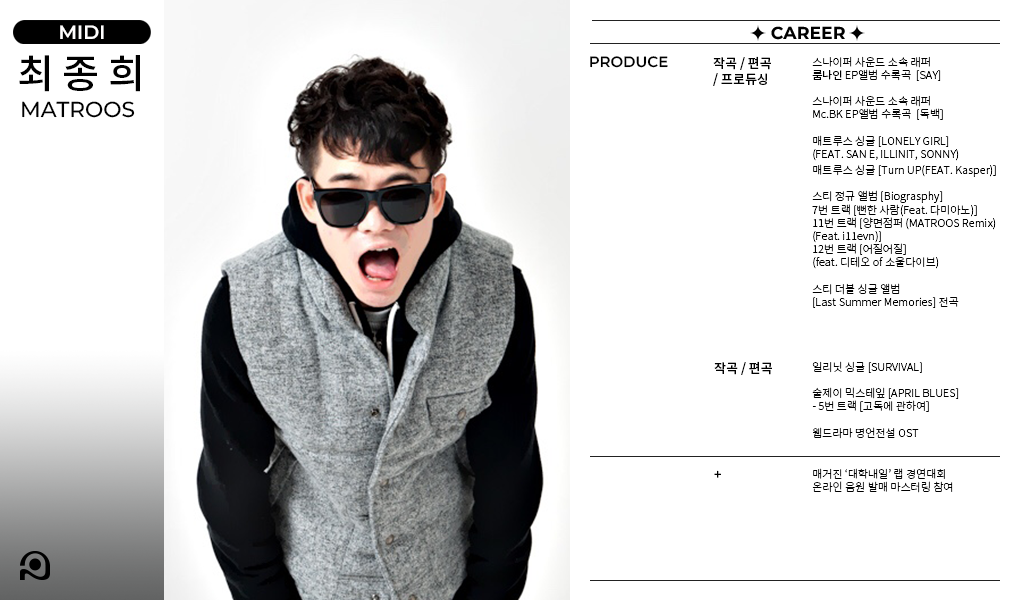
<style>
.page{position:relative;width:1020px;height:600px;background:#ffffff}
.page>*{position:absolute;margin:0}
.t1{font:19.4px "Montserrat-SemiBold";color:#fffefe}
.t2{font:17.3px "Montserrat-Bold";color:#000000}
.t3{font:39.9px "NotoSansKR-Medium";color:#000000}
.t4{font:15px "Montserrat-SemiBold";color:#000000}
.t5{font:13px "NotoSansKR-Medium";color:#000000}
.t6{font:11px "NotoSansKR-Light";color:#000000}
.t7{font:11px "NotoSansKR-Regular";color:#000000}
.t8{font:11px/16px "NotoSansKR-Light";color:#000000}
.t9{font:21.7px "Montserrat-Medium";color:#000000}
</style>
<div class="page">
<p class="t1" style="left:60px;top:25px;width:44px;height:14px">MIDI</p>
<p class="t2" style="left:771px;top:26px;width:74px;height:14px">CAREER</p>
<p class="t3" style="left:19px;top:55px;width:121px;height:37px">최 종 희</p>
<p class="t4" style="left:590px;top:56px;width:78px;height:12px">PRODUCE</p>
<p class="t5" style="left:713px;top:56px;width:58px;height:30px">작곡 / 편곡<br>/ 프로듀싱</p>
<p class="t6" style="left:812px;top:56px;width:184px;height:252px">스나이퍼 사운드 소속 래퍼 <br><span class="t7">룸나인</span> EP앨범 수록곡  [SAY]<br><br>스나이퍼 사운드 소속 래퍼 <br>Mc.BK EP앨범 수록곡  [독백] <br><br>매트루스 싱글 [LONELY GIRL]<br>(FEAT. SAN E, ILLINIT, SONNY)<br><span class="t8">매트루스 싱글 [Turn UP(FEAT. Kasper)]<br></span><br>스티 정규 앨범 [Biograsphy] <br>7번 트랙 [뻔한 사람(Feat. 다미아노)] <br>11번 트랙 [양면점퍼 (MATROOS Remix) <br>(Feat. i11evn)]<br>12번 트랙 [어질어질]<br>(feat. 디테오 of 소울다이브)<br><br>스티 더블 싱글 앨범 <br>[Last Summer Memories] 전곡 <br><br>골드마이너스 싱글 앨범 [Paradise]</p>
<p class="t9" style="left:22px;top:101px;width:113px;height:17px">MATROOS</p>
<p class="t5" style="left:714px;top:361px;width:58px;height:14px">작곡 / 편곡</p>
<p class="t6" style="left:812px;top:361px;width:147px;height:78px">일리닛 싱글 [SURVIVAL]<br><br>술제이 믹스테잎 [APRIL BLUES] <br>- 5번 트랙 [고독에 관하여]<br><br>웹드라마 명언전설 OST</p>
<p class="t5" style="left:714px;top:470px;width:7px;height:8px">+</p>
<p class="t6" style="left:812px;top:468px;width:141px;height:25px">매거진 ‘대학내일’ 랩 경연대회<br>온라인 음원 발매 마스터링 참여</p>
</div>
